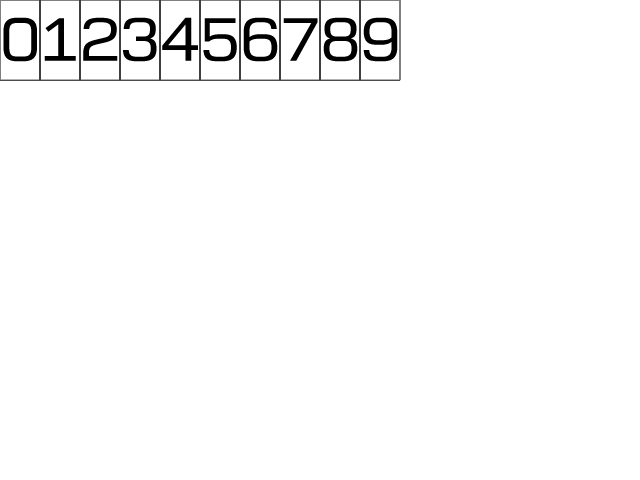
<style>
.page{position:relative;width:640px;height:480px;background:#ffffff}
.page>*{position:absolute;margin:0}
.t1{font:59px "Moire";color:#000000}
</style>
<div class="page">
<p class="t1" style="left:3px;top:17px;width:395px;height:45px">0123456789</p>
</div>
